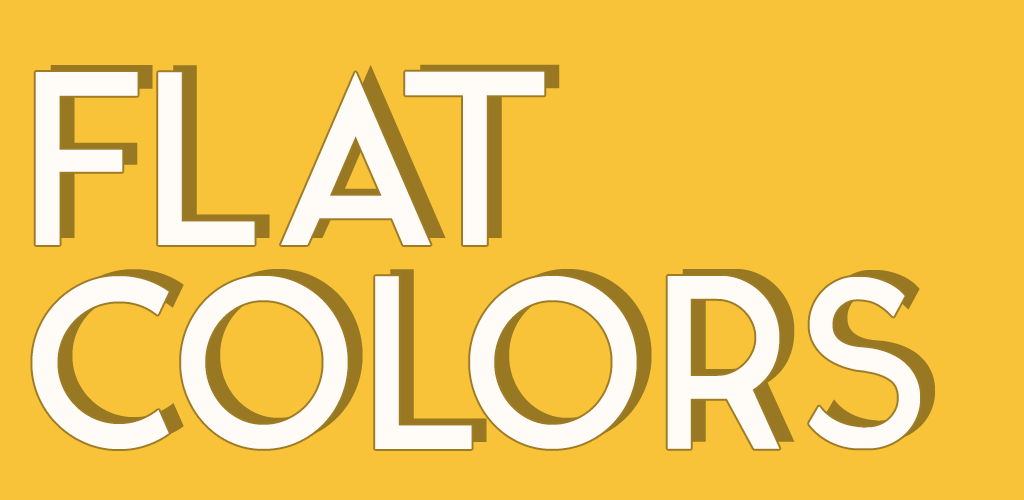
<style>
.page{position:relative;width:1024px;height:500px;background:#f8c339}
.page>*{position:absolute;margin:0}
.t1{font:246.8px/204.2px "Ikaros";letter-spacing:0.02em;color:#ffffff}
</style>
<div class="page">
<p class="t1" style="left:32px;top:71px;width:889px;height:378px;opacity:0.95">FLAT <br>COLORS</p>
</div>
